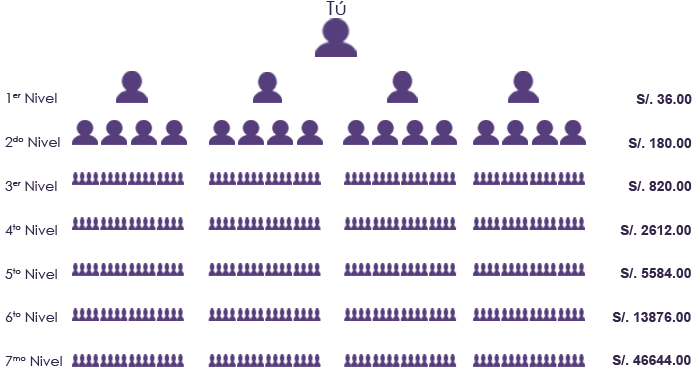
<style>
.page{position:relative;width:699px;height:385px;background:#ffffff}
.page>*{position:absolute;margin:0}
.t1{font:19.4px "CenturyGothic";color:#342649;scale:1.05 1}
.t2{font:14px "CenturyGothic";color:#342649}
.t3{font:24px "Arial-BoldMT";color:#342649}
</style>
<div class="page">
<p class="t1" style="left:326px;top:1px;width:20px;height:14px">Tú</p>
<p class="t2" style="left:7px;top:93px;width:50px;height:10px">1er Nivel</p>
<p class="t3" style="left:636px;top:94px;width:56px;height:10px">S/. 36.00</p>
<p class="t2" style="left:5px;top:136px;width:55px;height:11px">2do Nivel</p>
<p class="t3" style="left:628px;top:138px;width:64px;height:10px">S/. 180.00</p>
<p class="t2" style="left:5px;top:181px;width:52px;height:10px">3er Nivel</p>
<p class="t3" style="left:628px;top:181px;width:64px;height:10px">S/. 820.00</p>
<p class="t2" style="left:5px;top:224px;width:52px;height:11px">4to Nivel</p>
<p class="t3" style="left:620px;top:225px;width:71px;height:10px">S/. 2612.00</p>
<p class="t2" style="left:5px;top:268px;width:52px;height:11px">5to Nivel</p>
<p class="t3" style="left:620px;top:268px;width:71px;height:10px">S/. 5584.00</p>
<p class="t2" style="left:5px;top:311px;width:52px;height:11px">6to Nivel</p>
<p class="t3" style="left:612px;top:312px;width:79px;height:10px">S/. 13876.00</p>
<p class="t2" style="left:5px;top:356px;width:57px;height:10px">7mo Nivel</p>
<p class="t3" style="left:612px;top:355px;width:79px;height:10px">S/. 46644.00</p>
</div>
